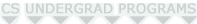
<style>
.page{position:relative;width:197px;height:24px;background:#eef4f2}
.page>*{position:absolute;margin:0}
.t1{font:13px "Verdana";letter-spacing:0.005em;color:#cdd1d1;font-weight:bold}
</style>
<div class="page">
<p class="t1" style="left:1px;top:3px;width:195px;height:11px">CS UNDERGRAD PROGRAMS</p>
</div>
